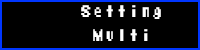
<style>
.page{position:relative;width:200px;height:50px;background:#000000}
.page>*{position:absolute;margin:0}
.t1{font:15.6px/24px "MegaManX";color:#ffffff;scale:0.77 1}
</style>
<div class="page">
<p class="t1" style="left:81px;top:5px;width:80px;height:36px;text-align:center">Setting<br>Multi</p>
</div>
